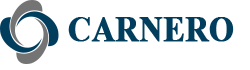
<style>
.page{position:relative;width:250px;height:70px;background:#ffffff}
.page>*{position:absolute;margin:0}
.t1{font:34.6px "TimesNewRomanPS-BoldMT";color:#013e5d;text-transform:uppercase;font-weight:bold;scale:0.92 1}
</style>
<div class="page">
<p class="t1" style="left:68px;top:17px;width:166px;height:25px">carnero</p>
</div>
